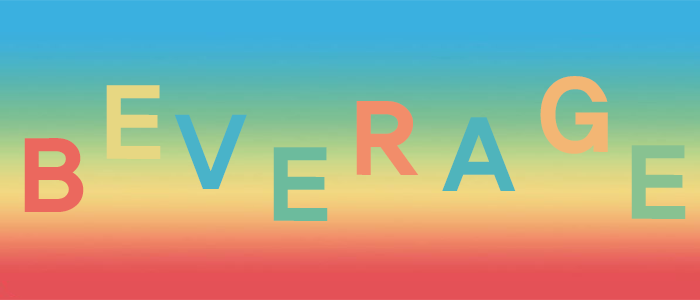
<style>
.page{position:relative;width:700px;height:300px}
.page>*{position:absolute;margin:0}
.t1{font:100px "YDIYGO360";letter-spacing:-0.15em;color:#f3b674}
.t2{font:100px "YDIYGO360";letter-spacing:-0.15em;color:#e7d782}
.t3{font:100px "YDIYGO360";letter-spacing:-0.15em;color:#f28d6a}
.t4{font:100px "YDIYGO360";letter-spacing:-0.15em;color:#49b3c9}
.t5{font:100px "YDIYGO360";letter-spacing:-0.15em;color:#4fb4bc}
.t6{font:100px "YDIYGO360";letter-spacing:-0.15em;color:#eb675e}
.t7{font:100px "YDIYGO360";letter-spacing:-0.15em;color:#6cbb9e}
.t8{font:100px "YDIYGO360";letter-spacing:-0.15em;color:#89c190}
</style>
<div class="page">
<p class="t1" style="left:540px;top:76px;width:68px;height:78px">G</p>
<p class="t2" style="left:106px;top:85px;width:55px;height:74px">E</p>
<p class="t3" style="left:356px;top:101px;width:63px;height:74px">R</p>
<p class="t4" style="left:174px;top:114px;width:73px;height:75px">V</p>
<p class="t5" style="left:442px;top:117px;width:74px;height:74px">A</p>
<p class="t6" style="left:24px;top:138px;width:60px;height:74px">B</p>
<p class="t7" style="left:273px;top:147px;width:55px;height:74px">E</p>
<p class="t8" style="left:631px;top:145px;width:55px;height:74px">E</p>
</div>
